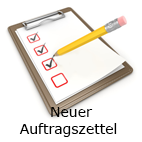
<style>
.page{position:relative;width:142px;height:142px;background:#ffffff}
.page>*{position:absolute;margin:0}
.t1{font:14px "Verdana";color:#000000}
</style>
<div class="page">
<p class="t1" style="left:19px;top:107px;width:98px;height:30px;text-align:center">Neuer<br>Auftragszettel</p>
</div>
